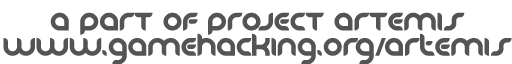
<style>
.page{position:relative;width:512px;height:64px;background:#ffffff}
.page>*{position:absolute;margin:0}
.t1{font:21px "DanubeBold";color:#555453}
</style>
<div class="page">
<p class="t1" style="left:3px;top:12px;width:509px;height:52px;text-align:center">A PART OF PROJECT ARTEMIS<br>www.gamehacking.org/artemis</p>
</div>
